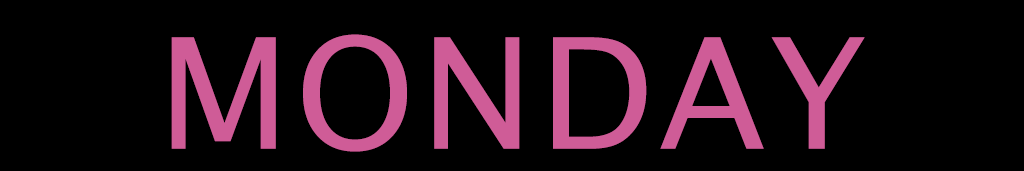
<style>
.page{position:relative;width:1024px;height:171px;background:#000000}
.page>*{position:absolute;margin:0}
.t1{font:153.9px "LucidaSansUnicode";letter-spacing:0.035em;color:#d05c98}
</style>
<div class="page">
<p class="t1" style="left:171px;top:34px;width:694px;height:118px">MONDAY</p>
</div>
